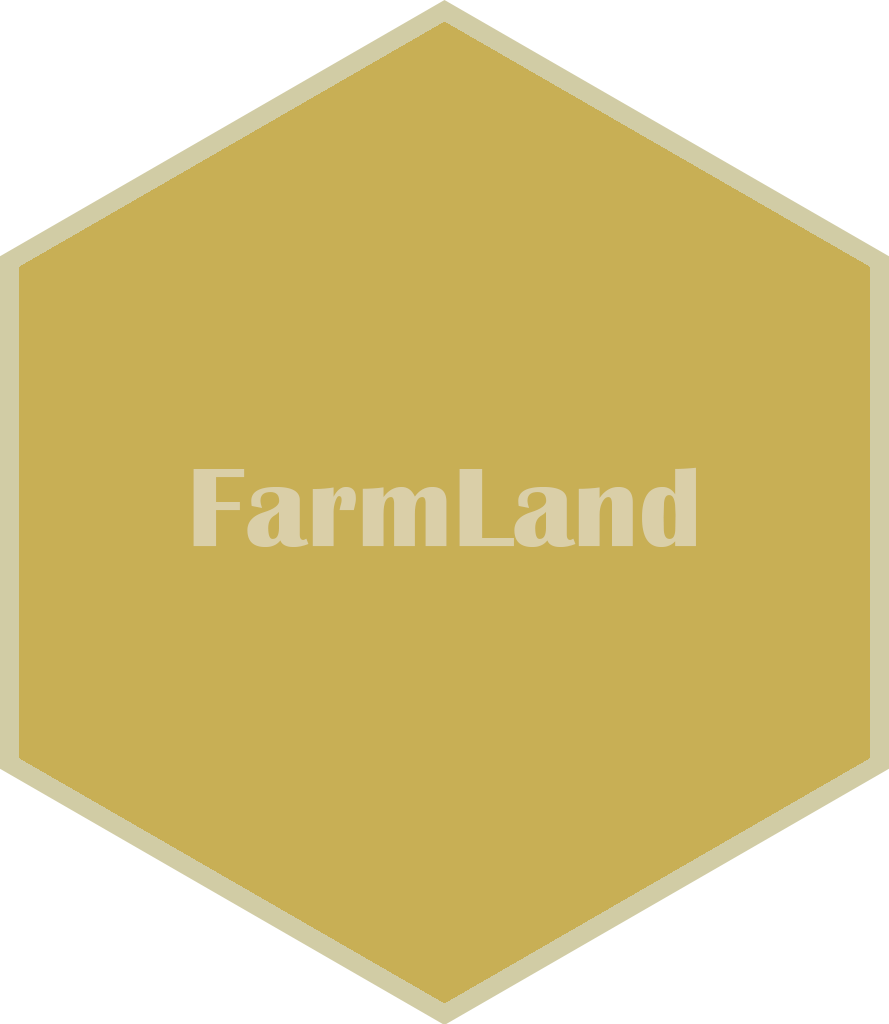
<style>
.page{position:relative;width:889px;height:1024px;background:#c8af55}
.page>*{position:absolute;margin:0}
.t1{font:116.5px "BritannicBold";color:#dacfa8}
</style>
<div class="page">
<p class="t1" style="left:193px;top:467px;width:503px;height:80px">FarmLand</p>
</div>
